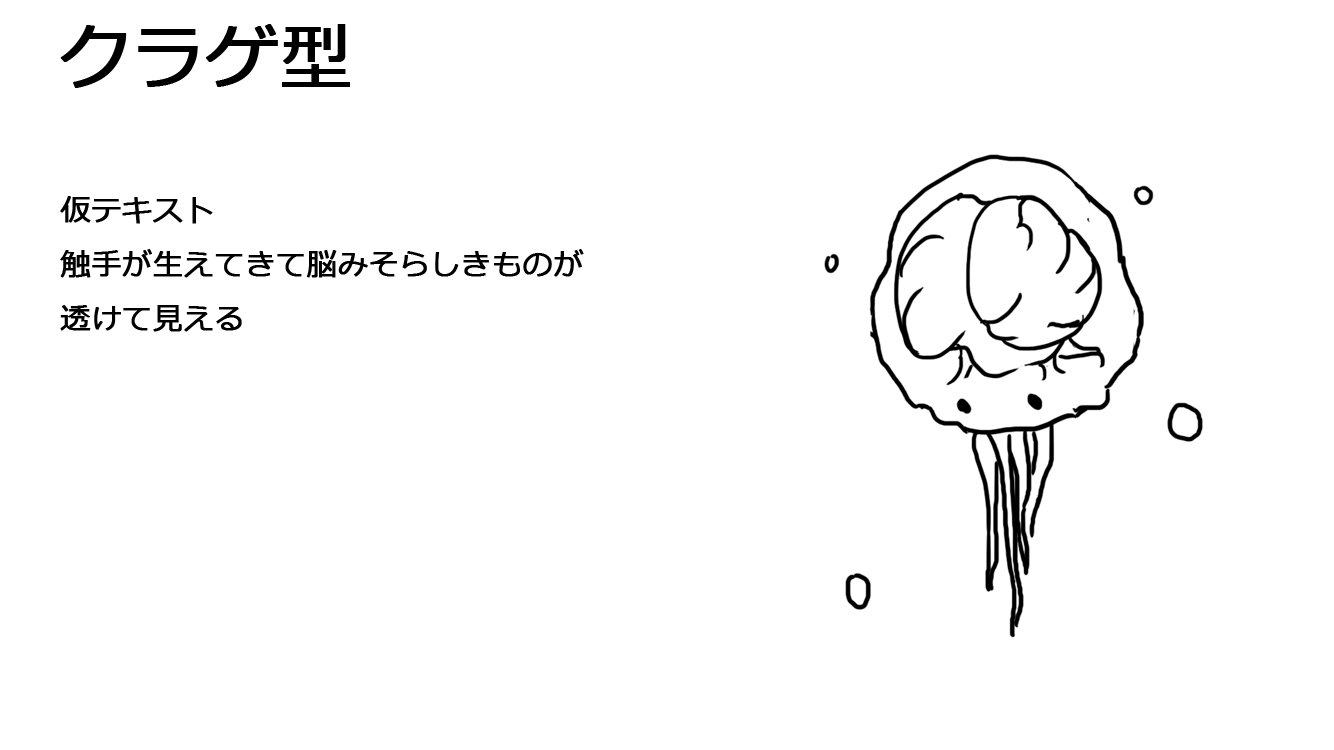
<style>
.page{position:relative;width:1334px;height:750px;background:#ffffff}
.page>*{position:absolute;margin:0}
.t1{font:72px "Meiryo";color:#000000;font-weight:bold}
.t2{font:30px "Meiryo";color:#000000;font-weight:bold}
</style>
<div class="page">
<p class="t1" style="left:60px;top:24px;width:290px;height:64px">クラゲ型</p>
<p class="t2" style="left:60px;top:196px;width:524px;height:136px">仮テキスト<br>触手が生えてきて脳みそらしきものが<br>透けて見える</p>
</div>
